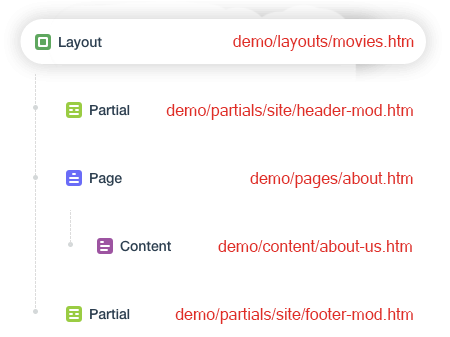
<style>
.page{position:relative;width:450px;height:337px;background:#ffffff}
.page>*{position:absolute;margin:0}
.t1{font:16px "MicrosoftSansSerif";color:#e02d26}
</style>
<div class="page">
<p class="t1" style="left:233px;top:35px;width:181px;height:16px">demo/layouts/movies.htm</p>
<p class="t1" style="left:166px;top:104px;width:247px;height:16px">demo/partials/site/header-mod.htm</p>
<p class="t1" style="left:250px;top:172px;width:163px;height:16px">demo/pages/about.htm</p>
<p class="t1" style="left:218px;top:240px;width:194px;height:12px">demo/content/about-us.htm</p>
<p class="t1" style="left:175px;top:308px;width:238px;height:16px">demo/partials/site/footer-mod.htm</p>
</div>
